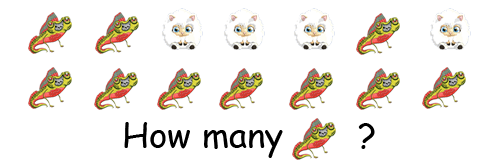
<style>
.page{position:relative;width:500px;height:168px;background:#ffffff}
.page>*{position:absolute;margin:0}
.t1{font:35px "ComicSansMS";color:#000000}
</style>
<div class="page">
<p class="t1" style="left:124px;top:122px;width:159px;height:36px">How many</p>
<p class="t1" style="left:358px;top:123px;width:17px;height:26px">?</p>
</div>
